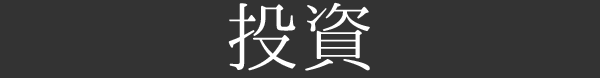
<style>
.page{position:relative;width:600px;height:78px;background:#333333}
.page>*{position:absolute;margin:0}
.t1{font:75px "02UtsukushiMincho";color:#ffffff}
</style>
<div class="page">
<p class="t1" style="left:228px;top:2px;width:142px;height:69px">投資</p>
</div>
